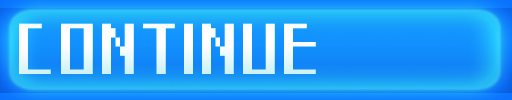
<style>
.page{position:relative;width:512px;height:100px}
.page>*{position:absolute;margin:0}
.t1{font:66.6px "Starcadia";color:#fffefe}
</style>
<div class="page">
<p class="t1" style="left:19px;top:23px;width:297px;height:51px">CONTINUE</p>
</div>
